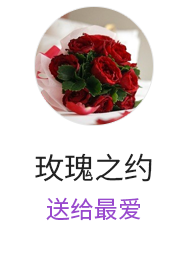
<style>
.page{position:relative;width:188px;height:266px;background:#ffffff}
.page>*{position:absolute;margin:0}
.t1{font:30px "SourceHanSansCN-Regular";color:#222222}
.t2{font:24px "SourceHanSansCN-Regular";color:#9a49ce}
</style>
<div class="page">
<p class="t1" style="left:35px;top:153px;width:117px;height:29px">玫瑰之约</p>
<p class="t2" style="left:46px;top:197px;width:95px;height:24px">送给最爱</p>
</div>
